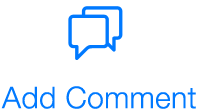
<style>
.page{position:relative;width:198px;height:111px;background:#ffffff}
.page>*{position:absolute;margin:0}
.t1{font:30px "HelveticaNeueLTCom-Lt";letter-spacing:0.015em;color:#0079ff}
</style>
<div class="page">
<p class="t1" style="left:1px;top:86px;width:195px;height:23px">Add Comment</p>
</div>
